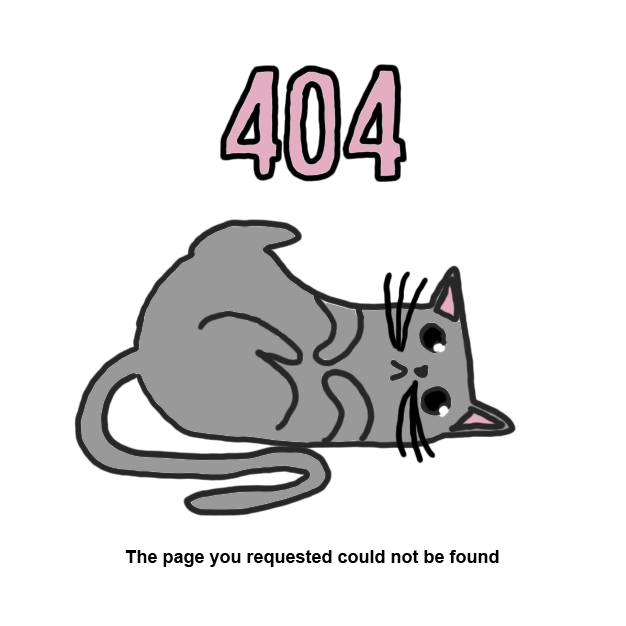
<style>
.page{position:relative;width:626px;height:626px;background:#ffffff}
.page>*{position:absolute;margin:0}
.t1{font:18px "Arial-BoldMT";color:#000000}
</style>
<div class="page">
<p class="t1" style="left:125px;top:550px;width:374px;height:17px">The page you requested could not be found</p>
</div>
